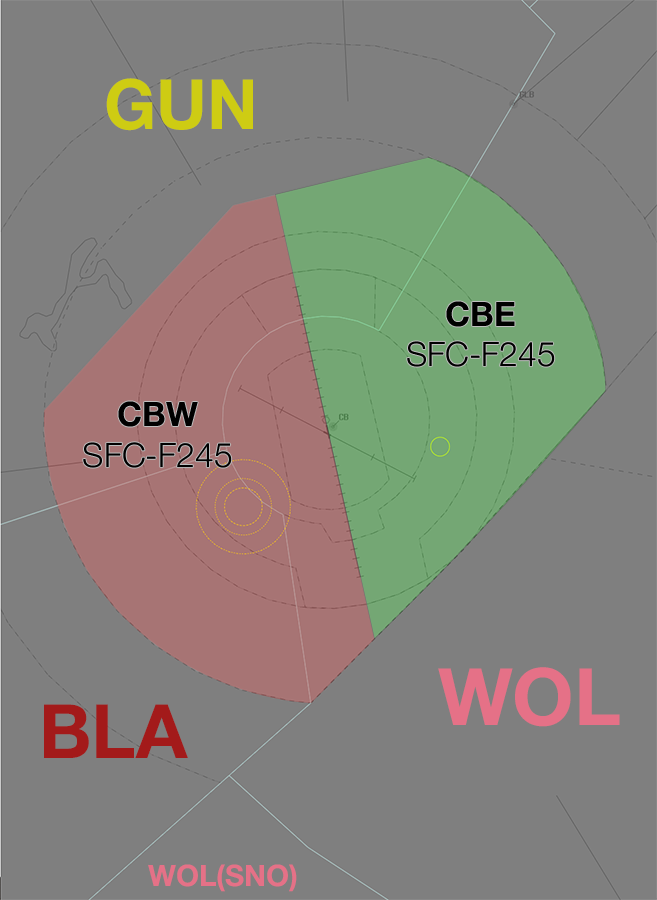
<style>
.page{position:relative;width:657px;height:900px;background:#7f7f7f}
.page>*{position:absolute;margin:0}
.t1{font:69.7px "HelveticaNeue-Bold";color:#cecc13}
.t2{font:33.7px "HelveticaNeue-Light";color:#000000}
.t3{font:33.7px "HelveticaNeue-Bold";color:#000000}
.t4{font:79.2px "HelveticaNeue-Bold";color:#e57187}
.t5{font:75px "HelveticaNeue-Bold";color:#a31a1a}
.t6{font:29.7px "HelveticaNeue-Bold";color:#e57187}
</style>
<div class="page">
<p class="t1" style="left:106px;top:78px;width:147px;height:53px">GUN</p>
<p class="t2" style="left:407px;top:301px;width:148px;height:66px;text-align:center"><span class="t3">CBE<br></span>SFC-F245</p>
<p class="t2" style="left:83px;top:401px;width:149px;height:67px;text-align:center"><span class="t3">CBW<br></span>SFC-F245</p>
<p class="t4" style="left:438px;top:667px;width:182px;height:60px">WOL</p>
<p class="t5" style="left:44px;top:704px;width:144px;height:54px">BLA</p>
<p class="t6" style="left:148px;top:864px;width:149px;height:28px">WOL(SNO)</p>
</div>
